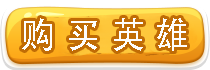
<style>
.page{position:relative;width:210px;height:70px}
.page>*{position:absolute;margin:0}
.t1{font:36px "AdobeHeitiStd-Regular";letter-spacing:0.05em;color:#fefefd;scale:0.95 1}
</style>
<div class="page">
<p class="t1" style="left:22px;top:18px;width:165px;height:33px">购 买 英 雄</p>
</div>
